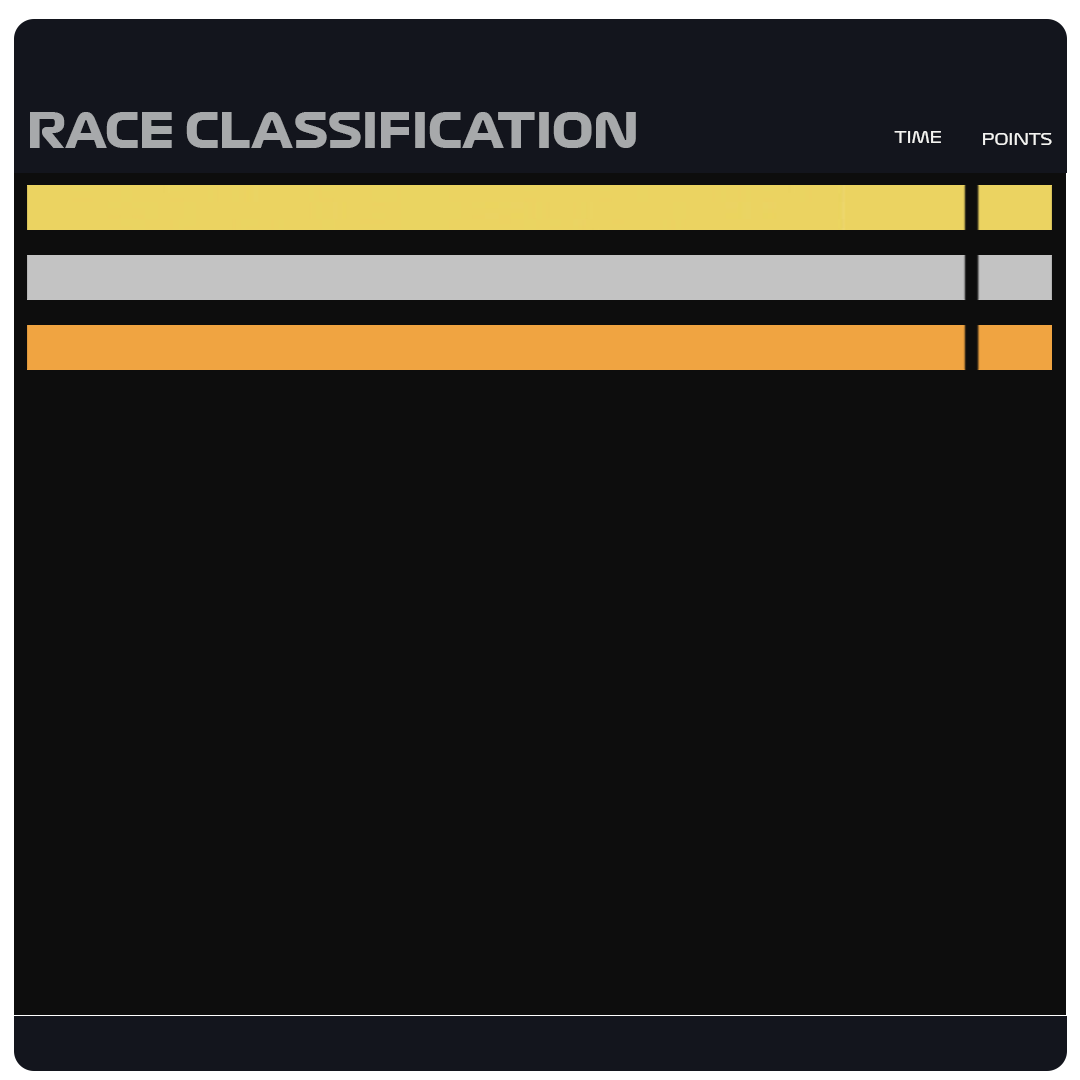
<style>
.page{position:relative;width:1080px;height:1080px;background:#0d0d0d}
.page>*{position:absolute;margin:0}
.t1{font:47.2px "Formula1-Display-Bold";color:#a7a9ab}
.t2{font:16.2px "Formula1-Display-Regular";color:#f3f3f1}
</style>
<div class="page">
<p class="t1" style="left:30px;top:112px;width:606px;height:36px">RACE CLASSIFICATION</p>
<p class="t2" style="left:894px;top:131px;width:47px;height:12px">TIME</p>
<p class="t2" style="left:983px;top:133px;width:69px;height:12px">POINTS</p>
</div>
